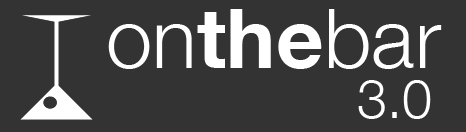
<style>
.page{position:relative;width:466px;height:132px;background:#333333}
.page>*{position:absolute;margin:0}
.t1{font:82.8px "HelveticaNeue-Bold";color:#ffffff}
.t2{font:82.8px "HelveticaNeue-Light";color:#ffffff}
.t3{font:53.6px "HelveticaNeue-Light";color:#ffffff}
</style>
<div class="page">
<p class="t1" style="left:108px;top:9px;width:334px;height:60px"><span class="t2">on</span>the<span class="t2">bar</span></p>
<p class="t3" style="left:358px;top:80px;width:73px;height:39px">3.0</p>
</div>
